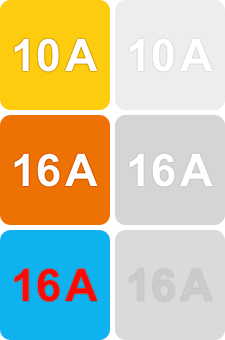
<style>
.page{position:relative;width:225px;height:340px}
.page>*{position:absolute;margin:0}
.t1{font:45px "Arial-BoldMT";color:#fdfefd;font-variant:small-caps}
.t2{font:45px "Arial-BoldMT";color:#fb0906;font-variant:small-caps}
</style>
<div class="page">
<p class="t1" style="left:14px;top:38px;width:84px;height:34px">10 А</p>
<p class="t1" style="left:14px;top:153px;width:84px;height:34px">16 А</p>
<p class="t2" style="left:14px;top:268px;width:84px;height:34px">16 А</p>
</div>
